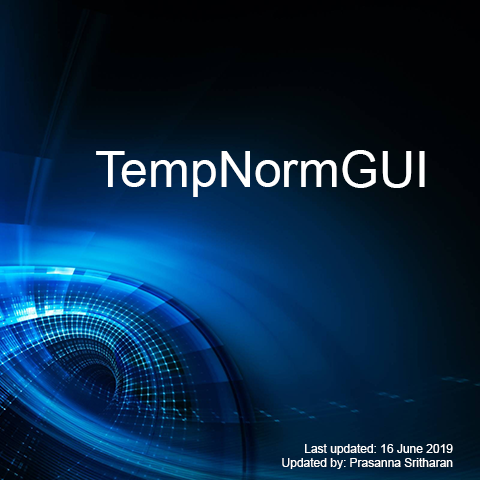
<style>
.page{position:relative;width:480px;height:480px}
.page>*{position:absolute;margin:0}
.t1{font:50px "ArialMT";color:#ffffff}
.t2{font:12px "ArialMT";color:#ffffff}
</style>
<div class="page">
<p class="t1" style="left:96px;top:150px;width:329px;height:47px">TempNormGUI</p>
<p class="t2" style="left:282px;top:444px;width:171px;height:25px;text-align:right">Last updated: 16 June 2019<br>Updated by: Prasanna Sritharan</p>
</div>
